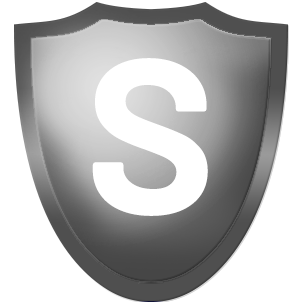
<style>
.page{position:relative;width:302px;height:302px;background:#ffffff}
.page>*{position:absolute;margin:0}
.t1{font:220px "Barlow-Bold";color:#ffffff}
</style>
<div class="page">
<p class="t1" style="left:92px;top:58px;width:116px;height:158px">S</p>
</div>
